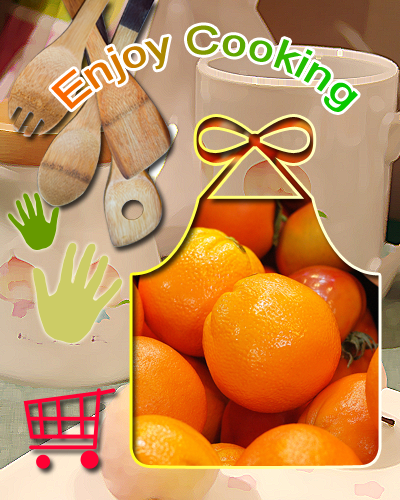
<style>
.page{position:relative;width:400px;height:500px}
.page>*{position:absolute;margin:0}
.t1{font:40px "ArialMT"}
</style>
<div class="page">
<p class="t1" style="left:51px;top:25px;width:307px;height:87px">Enjoy Cooking</p>
</div>
